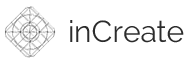
<style>
.page{position:relative;width:190px;height:66px;background:#ffffff}
.page>*{position:absolute;margin:0}
.t1{font:30px "Raleway";color:#2c2c2c}
</style>
<div class="page">
<p class="t1" style="left:70px;top:20px;width:114px;height:23px">inCreate</p>
</div>
